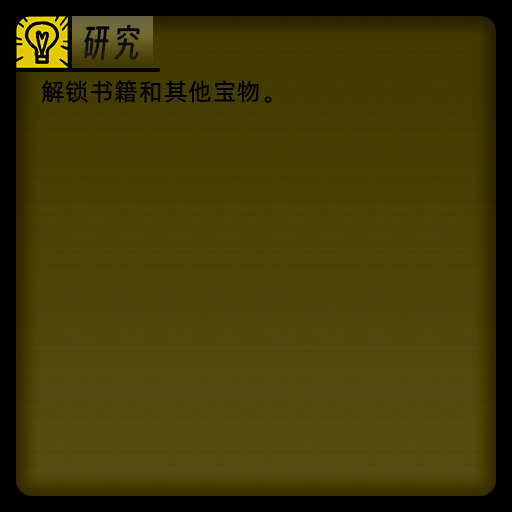
<style>
.page{position:relative;width:512px;height:512px}
.page>*{position:absolute;margin:0}
.t1{font:36px "SmileySans-Oblique";letter-spacing:0.04em;color:#000000}
.t2{font:24px "AlibabaPuHuiTiR";letter-spacing:0.04em;color:#000000}
</style>
<div class="page">
<p class="t1" style="left:84px;top:25px;width:56px;height:36px">研究</p>
<p class="t2" style="left:41px;top:80px;width:231px;height:23px">解锁书籍和其他宝物。</p>
</div>
